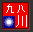
<style>
.page{position:relative;width:33px;height:32px;background:#f20000}
.page>*{position:absolute;margin:0}
.t1{font:10.4px "SimSun";color:#ffffff}
.t2{font:11.7px "SimSun";color:#ffffff}
</style>
<div class="page">
<p class="t1" style="left:6px;top:4px;width:19px;height:9px">九八</p>
<p class="t2" style="left:16px;top:15px;width:11px;height:12px">川</p>
</div>
